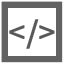
<style>
.page{position:relative;width:64px;height:64px;background:#ffffff}
.page>*{position:absolute;margin:0}
.t1{font:33.4px "SourceSansPro-Regular";color:#595959;font-weight:bold}
</style>
<div class="page">
<p class="t1" style="left:9px;top:19px;width:46px;height:30px">&lt;/&gt;</p>
</div>
